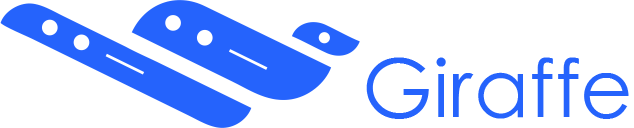
<style>
.page{position:relative;width:634px;height:128px;background:#ffffff}
.page>*{position:absolute;margin:0}
.t1{font:81.3px "STHeitiSC-Light";color:#2563fc}
</style>
<div class="page">
<p class="t1" style="left:366px;top:57px;width:263px;height:62px">Giraffe</p>
</div>
